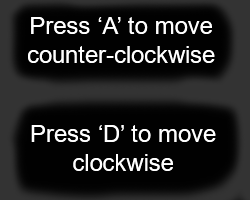
<style>
.page{position:relative;width:250px;height:200px;background:#010101}
.page>*{position:absolute;margin:0}
.t1{font:24px "ArialMT";color:#ffffff}
</style>
<div class="page">
<p class="t1" style="left:28px;top:17px;width:187px;height:46px;text-align:center">Press ‘A’ to move<br>counter-clockwise</p>
<p class="t1" style="left:31px;top:125px;width:185px;height:46px;text-align:center">Press ‘D’ to move<br>clockwise</p>
</div>
